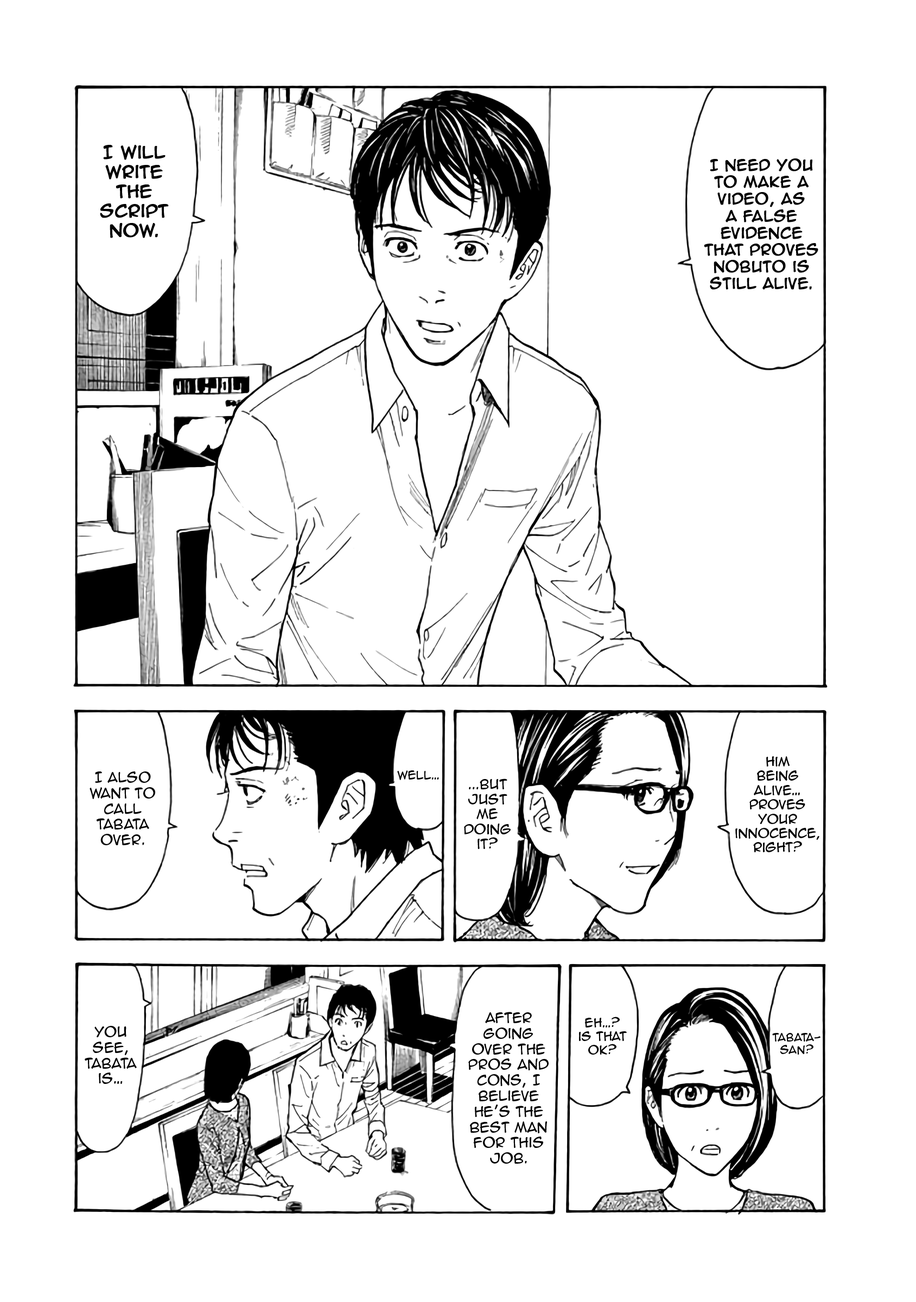
<style>
.page{position:relative;width:916px;height:1302px;background:#ffffff}
.page>*{position:absolute;margin:0}
.t1{font:16.3px "AnimeAce2.0BB";color:#000000;font-weight:bold}
.t2{font:14.1px "AnimeAce2.0BB";color:#000000;font-weight:bold}
.t3{font:11.9px "AnimeAce2.0BB";color:#000000}
.t4{font:13px "AnimeAce2.0BB";color:#000000}
.t5{font:10.9px "AnimeAce2.0BB";color:#000000}
.t6{font:12.5px "AnimeAce2.0BB";color:#000000}
.t7{font:11.4px "AnimeAce2.0BB";color:#000000}
.t8{font:10.3px "AnimeAce2.0BB";color:#000000}
</style>
<div class="page">
<p class="t1" style="left:100px;top:145px;width:69px;height:93px;text-align:center">I will<br>write<br>the<br>script<br>now.</p>
<p class="t2" style="left:704px;top:158px;width:114px;height:132px;text-align:center">I need you<br>to make a<br>video, as<br>a false<br>evidence<br>that proves<br>Nobuto is<br>still alive.</p>
<p class="t3" style="left:735px;top:756px;width:84px;height:96px;text-align:center">Him<br>being<br>alive…<br>proves<br>your<br>innocence,<br>right?</p>
<p class="t4" style="left:90px;top:771px;width:65px;height:74px;text-align:center">I also<br>want to<br>call<br>Tabata<br>over.</p>
<p class="t5" style="left:397px;top:770px;width:42px;height:10px">Well…</p>
<p class="t6" style="left:464px;top:779px;width:47px;height:70px;text-align:center">...But<br>just<br>me<br>doing<br>it?</p>
<p class="t4" style="left:468px;top:1012px;width:80px;height:152px;text-align:center">after<br>going<br>over the<br>pros and<br>cons, I<br>believe<br>he’s the<br>best man<br>for this<br>job.</p>
<p class="t4" style="left:85px;top:1026px;width:52px;height:58px;text-align:center">You<br>see,<br>tabata<br>is…</p>
<p class="t7" style="left:579px;top:1017px;width:48px;height:38px;text-align:center">Eh…?<br>is that<br>ok?</p>
<p class="t8" style="left:772px;top:1033px;width:48px;height:22px;text-align:center">Tabata-<br>san?</p>
</div>
